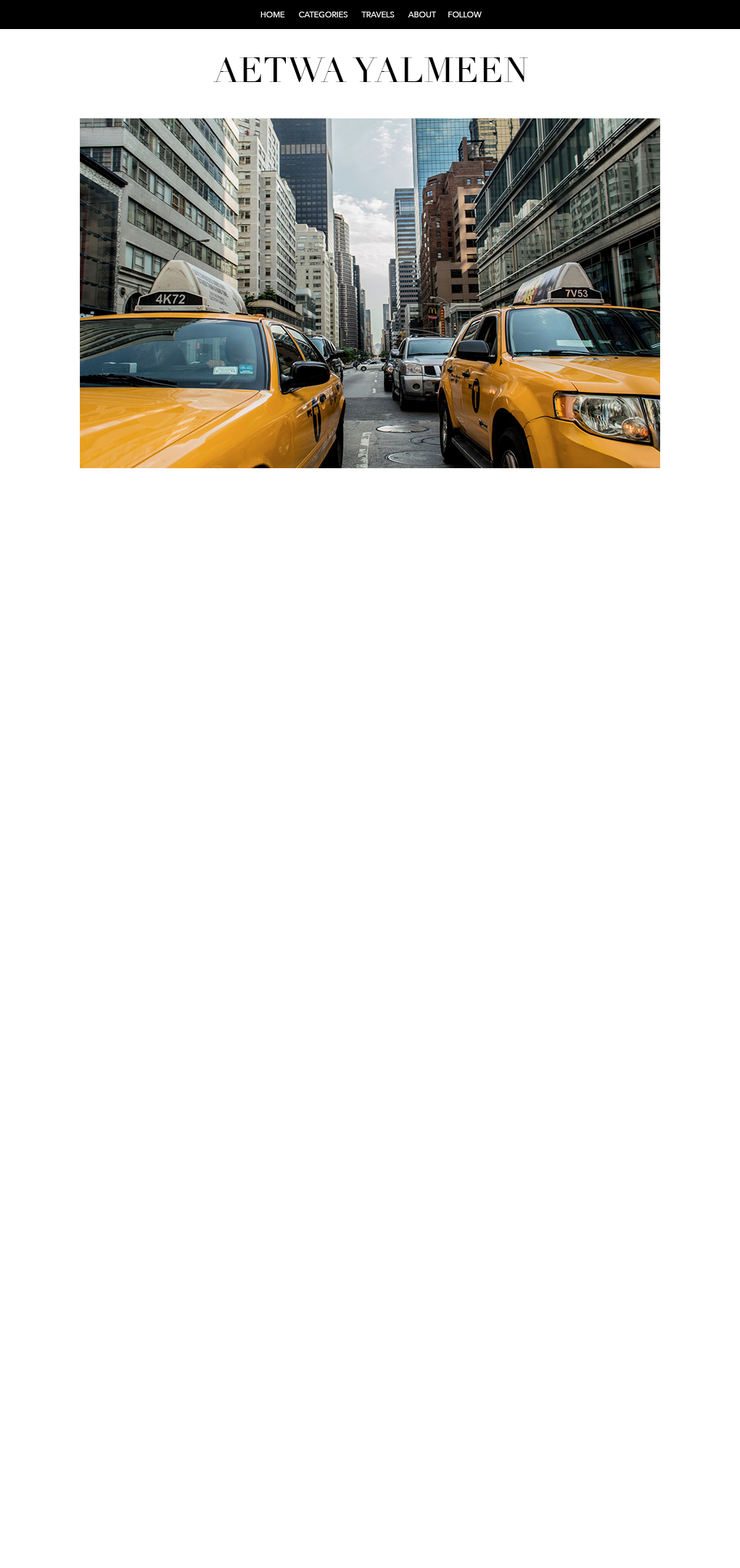
<style>
.page{position:relative;width:740px;height:1568px;background:#ffffff}
.page>*{position:absolute;margin:0}
.t1{font:8px "AvenirNext-Regular";color:#ffffff}
.t2{font:34.8px "Didot";color:#000000}
</style>
<div class="page">
<p class="t1" style="left:261px;top:12px;width:221px;height:5px">HOME       CATEGORIES       TRAVELS       ABOUT      FOLLOW</p>
<p class="t2" style="left:213px;top:57px;width:315px;height:25px">AETWA YALMEEN</p>
</div>
